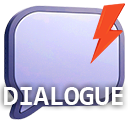
<style>
.page{position:relative;width:128px;height:128px;background:#ffffff}
.page>*{position:absolute;margin:0}
.t1{font:27.7px "Consolas-Bold";color:#ffffff}
</style>
<div class="page">
<p class="t1" style="left:4px;top:87px;width:119px;height:18px">DIALOGUE</p>
</div>
